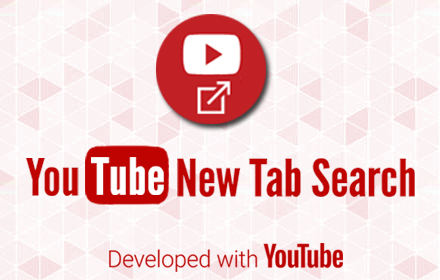
<style>
.page{position:relative;width:440px;height:280px;background:#fbf2f3}
.page>*{position:absolute;margin:0}
.t1{font:51.1px "LeagueGothic-Regular";color:#bf0301;scale:1.1 1}
.t2{font:51.1px "LeagueGothic-Regular";color:#ffffff;scale:1.1 1}
</style>
<div class="page">
<p class="t1" style="left:26px;top:158px;width:53px;height:38px">You</p>
<p class="t2" style="left:91px;top:157px;width:73px;height:38px">Tube</p>
<p class="t1" style="left:177px;top:158px;width:238px;height:39px">New Tab Search</p>
</div>
